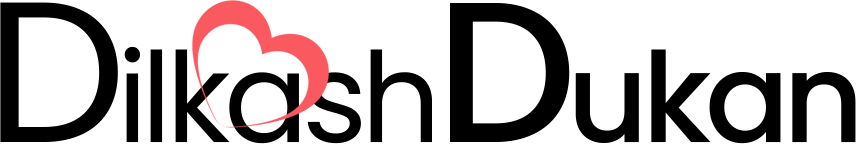
<style>
.page{position:relative;width:856px;height:144px;background:#ffffff}
.page>*{position:absolute;margin:0}
.t1{font:125px "Poppins-Regular";letter-spacing:-0.05em;color:#000000}
.t2{font:200px "Poppins-Regular";letter-spacing:-0.05em;color:#000000}
.t3{font:200px "Poppins-Medium";letter-spacing:-0.05em;color:#000000}
.t4{font:125px "Poppins-Medium";letter-spacing:-0.05em;color:#000000}
</style>
<div class="page">
<p class="t1" style="left:0px;top:2px;width:856px;height:142px"><span class="t2">D</span>ilkash<span class="t3">D</span><span class="t4">ukan</span></p>
</div>
